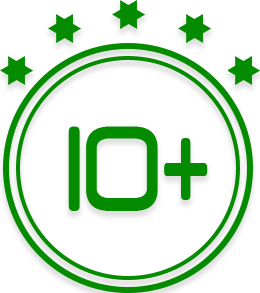
<style>
.page{position:relative;width:260px;height:293px;background:#ffffff}
.page>*{position:absolute;margin:0}
.t1{font:116px "Neuropol-Regular";color:#058b00;scale:0.7 1}
</style>
<div class="page">
<p class="t1" style="left:68px;top:126px;width:140px;height:85px">10+</p>
</div>
